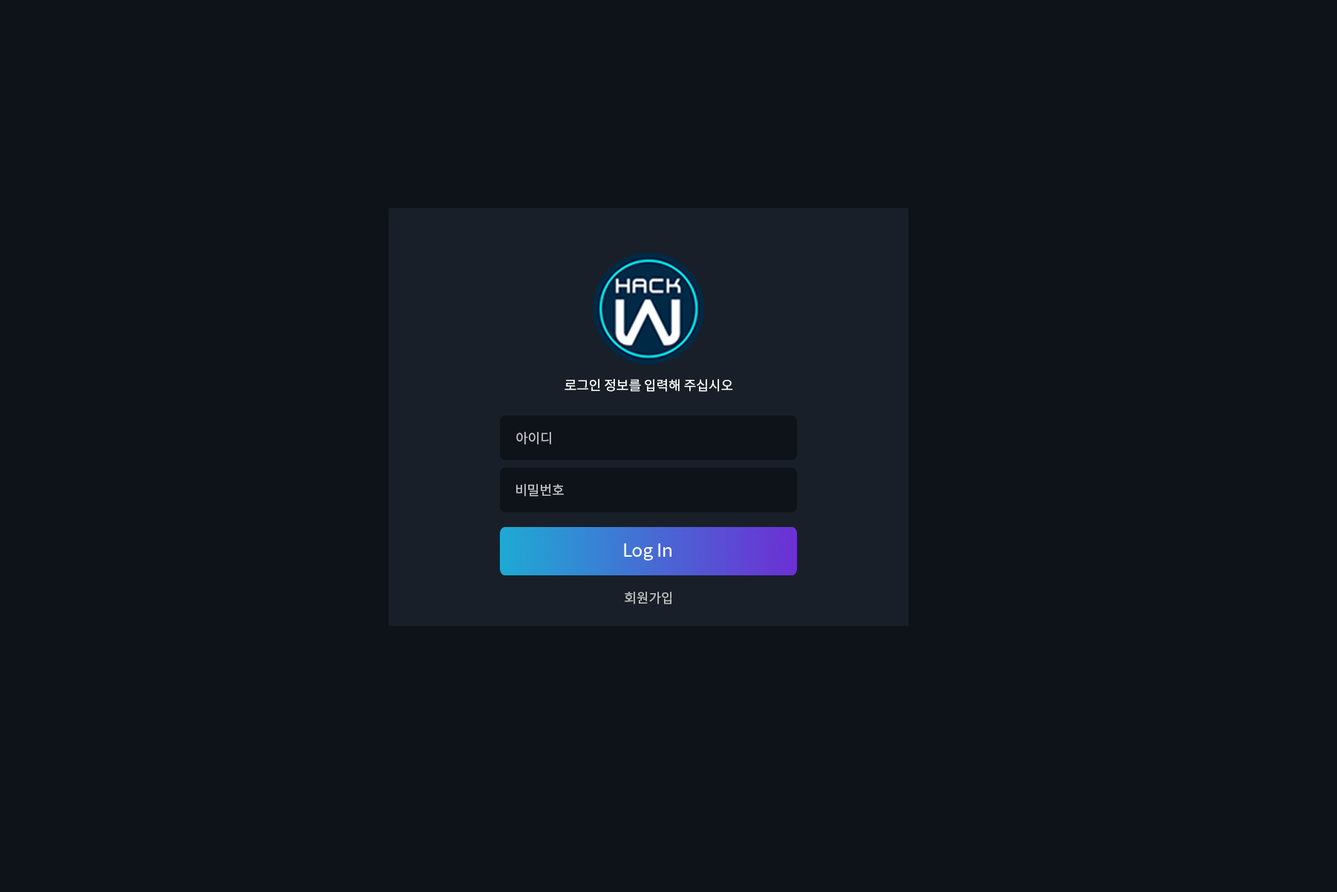
<style>
.page{position:relative;width:1337px;height:892px;background:#0e131a}
.page>*{position:absolute;margin:0}
.t1{font:13.4px "NotoSansCJKkr-Regular";color:#ffffff}
.t2{font:13.4px "NotoSansCJKkr-Regular";color:#c3c3c3}
.t3{font:17.8px "NotoSansCJKkr-Regular";color:#ffffff}
</style>
<div class="page">
<p class="t1" style="left:565px;top:378px;width:168px;height:14px">로그인 정보를 입력해 주십시오</p>
<p class="t2" style="left:516px;top:432px;width:35px;height:12px">아이디</p>
<p class="t2" style="left:516px;top:484px;width:48px;height:12px">비밀번호</p>
<p class="t3" style="left:624px;top:543px;width:48px;height:17px">Log In</p>
<p class="t2" style="left:625px;top:591px;width:47px;height:13px">회원가입</p>
</div>
